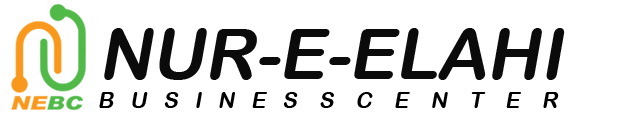
<style>
.page{position:relative;width:642px;height:121px;background:#ffffff}
.page>*{position:absolute;margin:0}
.t1{font:70px "ArialRoundedMTBold";color:#0b0b0b;font-style:italic}
.t2{font:22px "ArialRoundedMTBold";color:#000000;font-style:italic}
</style>
<div class="page">
<p class="t1" style="left:104px;top:28px;width:461px;height:52px">NUR-E-ELAHI</p>
<p class="t2" style="left:99px;top:92px;width:460px;height:16px">B   U   S   I   N   E   S    S    C    E    N    T    E    R</p>
</div>
